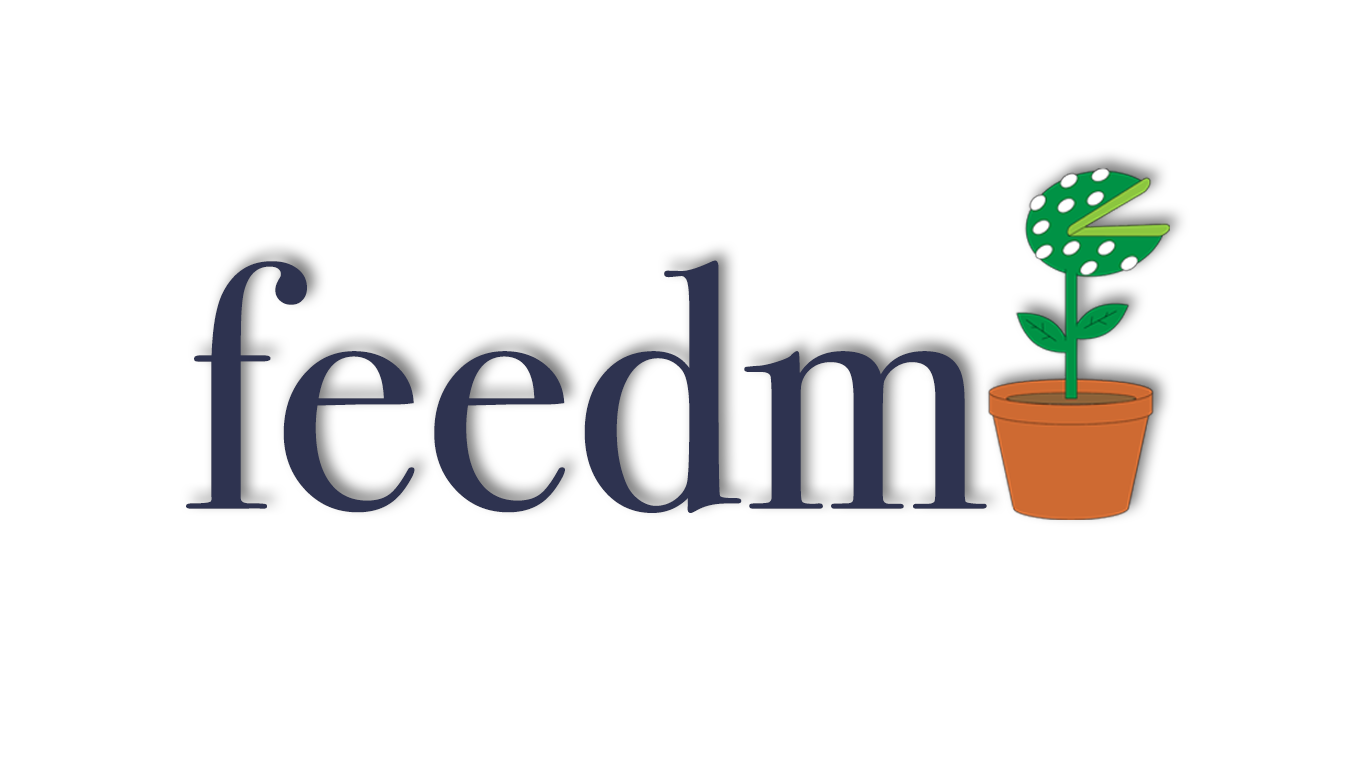
<style>
.page{position:relative;width:1366px;height:768px;background:#ffffff}
.page>*{position:absolute;margin:0}
.t1{font:350px "BodoniSvtyTwoITCTT-Book";color:#2e3350}
</style>
<div class="page">
<p class="t1" style="left:186px;top:260px;width:801px;height:253px">feedm</p>
</div>
